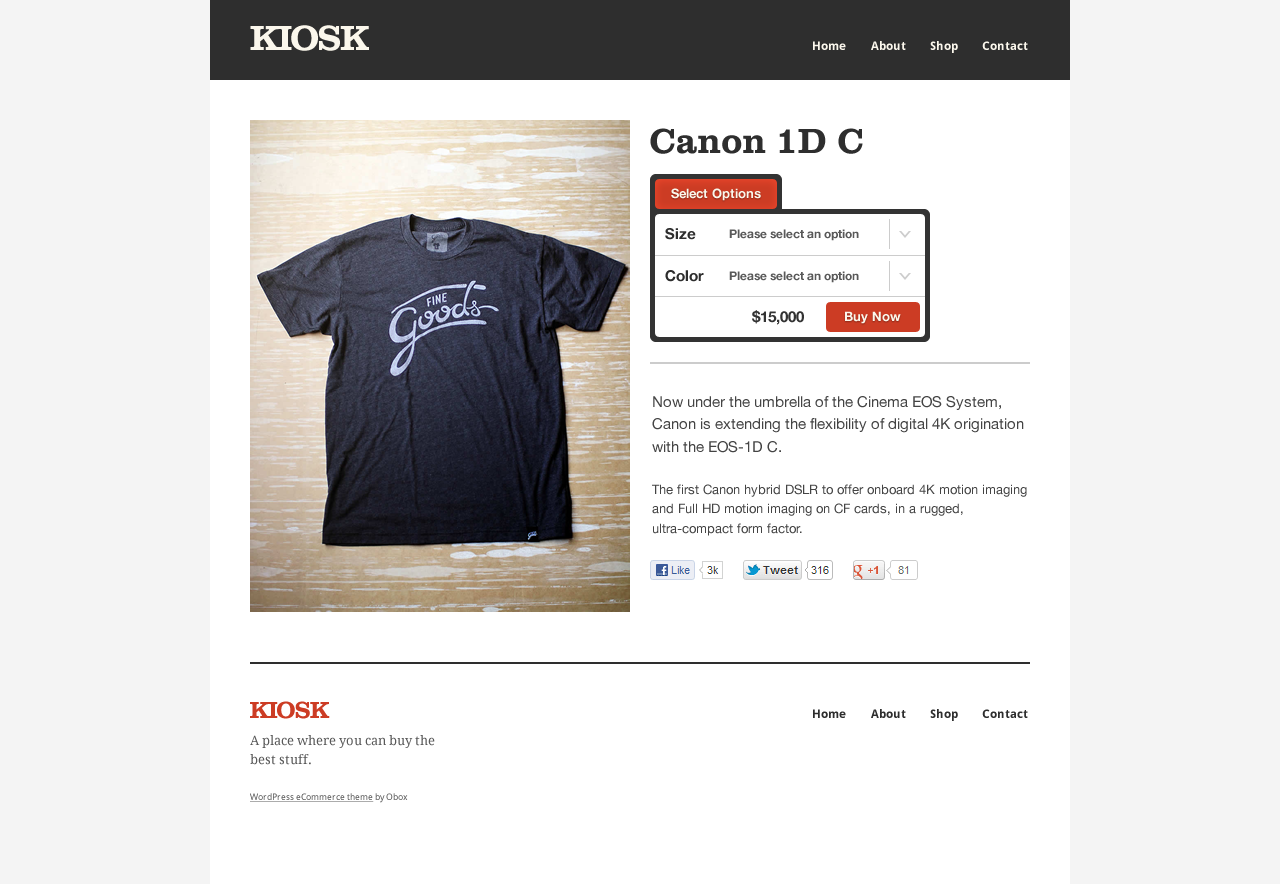
<style>
.page{position:relative;width:1280px;height:884px;background:#ffffff}
.page>*{position:absolute;margin:0}
.t1{font:36px "Clarendon";letter-spacing:-0.06em;color:#fbf7ec}
.t2{font:12px "DroidSans-Bold";color:#fbf7ec}
.t3{font:36px "Clarendon";color:#2e2e2e}
.t4{font:13px "HelveticaNeue-Bold";color:#faf7eb}
.t5{font:15px "HelveticaNeue-Bold";color:#2e2e2e}
.t6{font:12px "HelveticaNeue-Bold";color:#595959}
.t7{font:15px "HelveticaNeue-Bold";color:#2d2d2d}
.t8{font:15px "HelveticaNeue-Bold";color:#333333}
.t9{font:13px "HelveticaNeue-Bold";color:#fbf7ec}
.t10{font:13px/19.5px "HelveticaNeue";color:#444444}
.t11{font:15px/22.5px "HelveticaNeue";color:#444444}
.t12{font:24px "Clarendon";letter-spacing:-0.06em;color:#cc3c24}
.t13{font:12px "DroidSans-Bold";color:#2e2e2e}
.t14{font:13px/19.5px "DroidSerif";color:#595959}
.t15{font:9px "DroidSans";text-decoration:underline}
.t16{font:9px "DroidSans"}
</style>
<div class="page">
<p class="t1" style="left:250px;top:25px;width:119px;height:26px">KIOSK</p>
<p class="t2" style="left:813px;top:41px;width:33px;height:9px">Home</p>
<p class="t2" style="left:871px;top:41px;width:35px;height:9px">About</p>
<p class="t2" style="left:930px;top:41px;width:28px;height:12px">Shop</p>
<p class="t2" style="left:982px;top:41px;width:46px;height:9px">Contact</p>
<p class="t3" style="left:650px;top:128px;width:213px;height:26px">Canon 1D C</p>
<p class="t4" style="left:671px;top:188px;width:90px;height:13px">Select Options</p>
<p class="t5" style="left:665px;top:228px;width:31px;height:12px">Size</p>
<p class="t6" style="left:729px;top:229px;width:130px;height:12px">Please select an option</p>
<p class="t7" style="left:665px;top:270px;width:39px;height:12px">Color</p>
<p class="t6" style="left:729px;top:271px;width:130px;height:12px">Please select an option</p>
<p class="t8" style="left:752px;top:310px;width:52px;height:15px">$15,000</p>
<p class="t9" style="left:845px;top:311px;width:56px;height:13px">Buy Now</p>
<p class="t10" style="left:652px;top:396px;width:375px;height:140px"><span class="t11">Now under the umbrella of the Cinema EOS System, Canon is extending the flexibility of digital 4K origination with the EOS-1D C.<br><br></span>The first Canon hybrid DSLR to offer onboard 4K motion imaging and Full HD motion imaging on CF cards, in a rugged, ultra-compact form factor.</p>
<p class="t12" style="left:250px;top:701px;width:80px;height:18px">KIOSK</p>
<p class="t13" style="left:813px;top:709px;width:33px;height:9px">Home</p>
<p class="t13" style="left:871px;top:709px;width:35px;height:9px">About</p>
<p class="t13" style="left:930px;top:709px;width:28px;height:12px">Shop</p>
<p class="t13" style="left:982px;top:709px;width:46px;height:9px">Contact</p>
<p class="t14" style="left:250px;top:735px;width:185px;height:30px">A place where you can buy the best stuff.</p>
<p class="t15" style="left:250px;top:793px;width:158px;height:10px">WordPress eCommerce theme<span class="t16"> by Obox</span></p>
</div>
